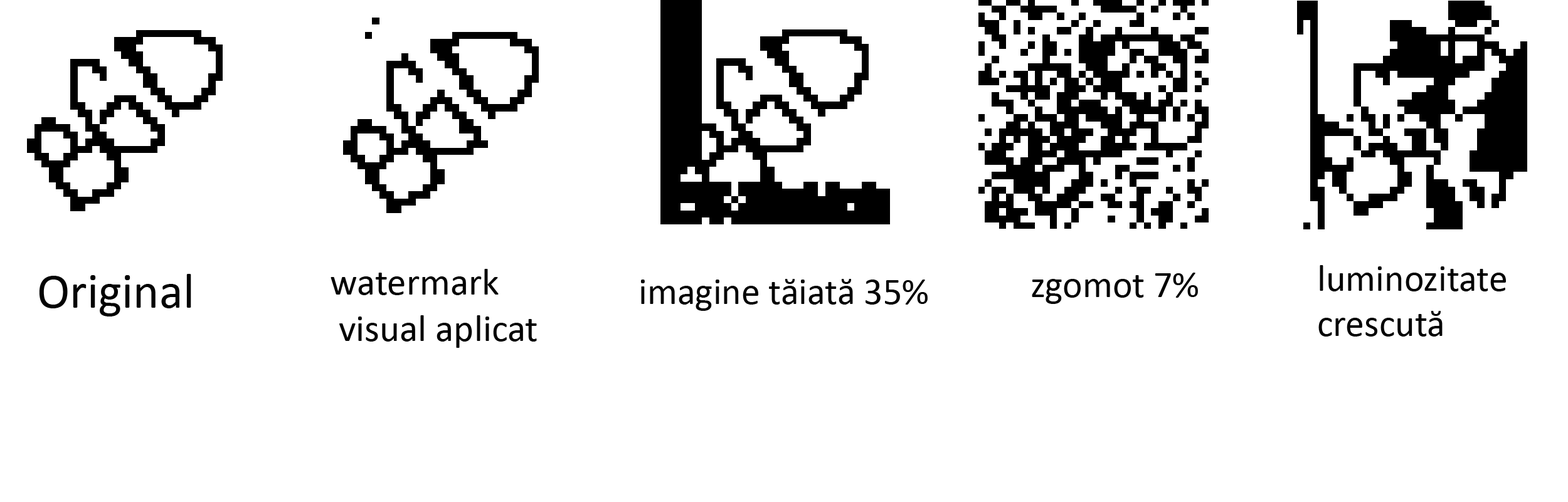
<style>
.page{position:relative;width:1568px;height:502px;background:#ffffff}
.page>*{position:absolute;margin:0}
.t1{font:38.3px "Calibri";color:#030303}
.t2{font:37.6px "Calibri";color:#030303}
.t3{font:49.5px "Calibri";color:#030303}
</style>
<div class="page">
<p class="t1" style="left:331px;top:269px;width:206px;height:79px">watermark<br> visual aplicat</p>
<p class="t2" style="left:1318px;top:265px;width:188px;height:72px">luminozitate<br>crescută</p>
<p class="t3" style="left:39px;top:274px;width:152px;height:43px">Original</p>
<p class="t2" style="left:640px;top:279px;width:288px;height:32px">imagine tăiată 35%</p>
<p class="t2" style="left:1032px;top:273px;width:166px;height:31px">zgomot 7%</p>
</div>
